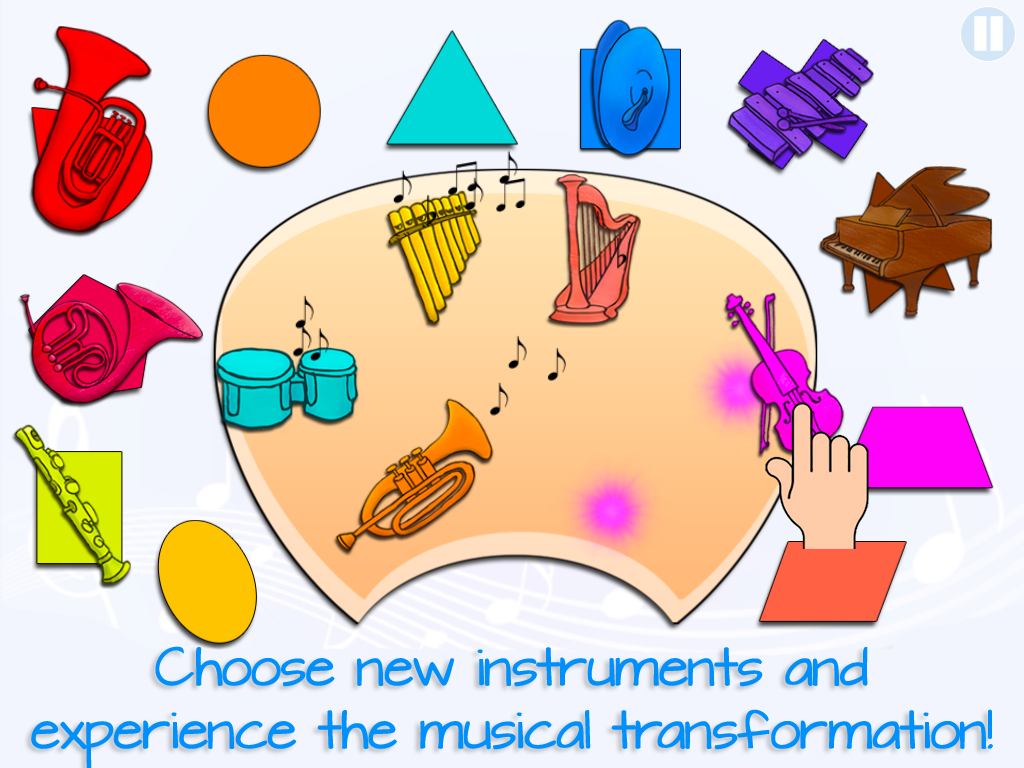
<style>
.page{position:relative;width:1024px;height:768px}
.page>*{position:absolute;margin:0}
.t1{font:46px/63px "ArchitectsDaughter";letter-spacing:-0.018em;color:#0090fb}
</style>
<div class="page">
<p class="t1" style="left:31px;top:646px;width:962px;height:124px;text-align:center">Choose new instruments and <br>experience the musical transformation!</p>
</div>
